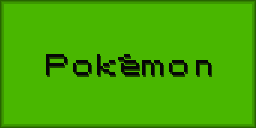
<style>
.page{position:relative;width:256px;height:128px;background:#49b700}
.page>*{position:absolute;margin:0}
.t1{font:24px "PokemonGB";color:#060606}
</style>
<div class="page">
<p class="t1" style="left:46px;top:54px;width:165px;height:21px">Pokémon</p>
</div>
